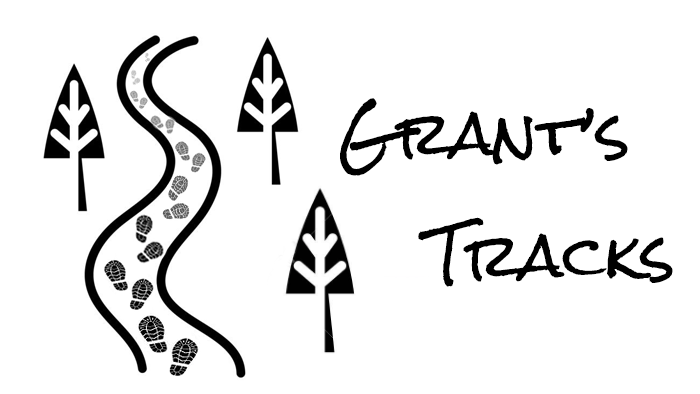
<style>
.page{position:relative;width:700px;height:394px;background:#ffffff}
.page>*{position:absolute;margin:0}
.t1{font:58.1px "RockSalt-Regular";color:#000000}
</style>
<div class="page">
<p class="t1" style="left:340px;top:98px;width:288px;height:78px">Grant’s</p>
<p class="t1" style="left:418px;top:217px;width:255px;height:70px">Tracks</p>
</div>
